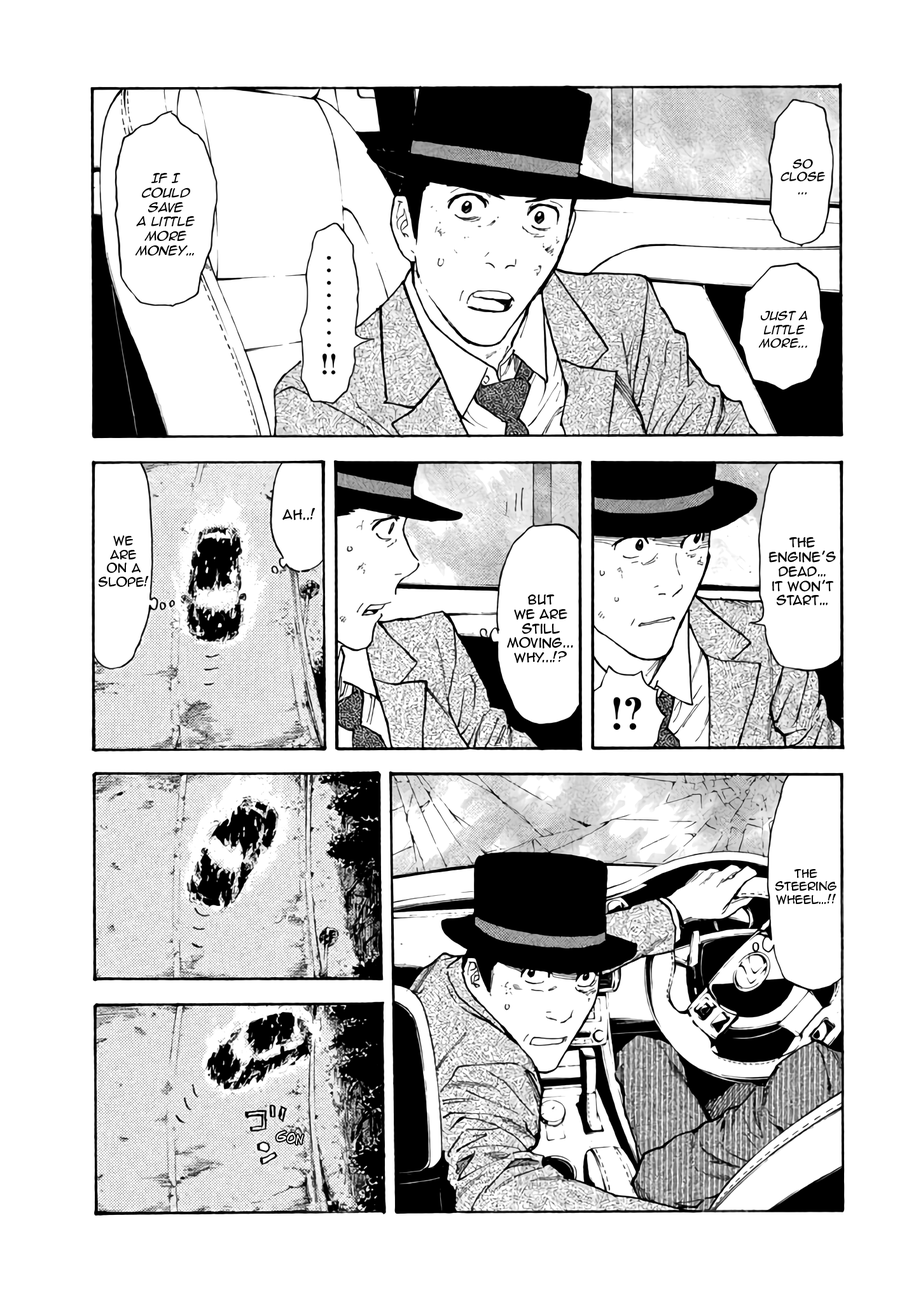
<style>
.page{position:relative;width:916px;height:1302px;background:#ffffff}
.page>*{position:absolute;margin:0}
.t1{font:10.8px "AnimeAce2.0BB";color:#000000;font-style:italic}
.t2{font:12.1px "AnimeAce2.0BB-Italic";color:#000000}
.t3{font:11.4px "AnimeAce2.0BB-Italic";color:#000000}
.t4{font:12.7px "AnimeAce2.0BB";color:#000000}
.t5{font:11.4px "AnimeAce2.0BB";color:#000000}
.t6{font:12.1px "AnimeAce2.0BB";color:#000000}
.t7{font:10.8px "AnimeAce2.0BB";color:#000000}
.t8{font:14px "AdamWarrenpro";color:#ffffff}
</style>
<div class="page">
<p class="t1" style="left:780px;top:159px;width:45px;height:36px;text-align:center">So<br>close<br>...</p>
<p class="t2" style="left:135px;top:173px;width:60px;height:83px;text-align:center">If I<br>could<br>save<br>a little<br>more<br>money…</p>
<p class="t3" style="left:759px;top:311px;width:49px;height:37px;text-align:center">Just A<br>Little<br>More...</p>
<p class="t4" style="left:282px;top:508px;width:33px;height:12px">Ah..!</p>
<p class="t5" style="left:99px;top:535px;width:50px;height:52px;text-align:center">We<br>are<br>on a<br>slope!</p>
<p class="t6" style="left:768px;top:537px;width:68px;height:69px;text-align:center">The<br>engine’s<br>dead…<br>it won’t<br>start…</p>
<p class="t6" style="left:507px;top:595px;width:66px;height:68px;text-align:center">but<br>we are<br>still<br>moving...<br>Why...!?</p>
<p class="t7" style="left:775px;top:869px;width:61px;height:36px;text-align:center">The<br>steering<br>wheel…!!</p>
<p class="t8" style="left:276px;top:1131px;width:27px;height:14px;rotate:12deg">GON</p>
</div>
